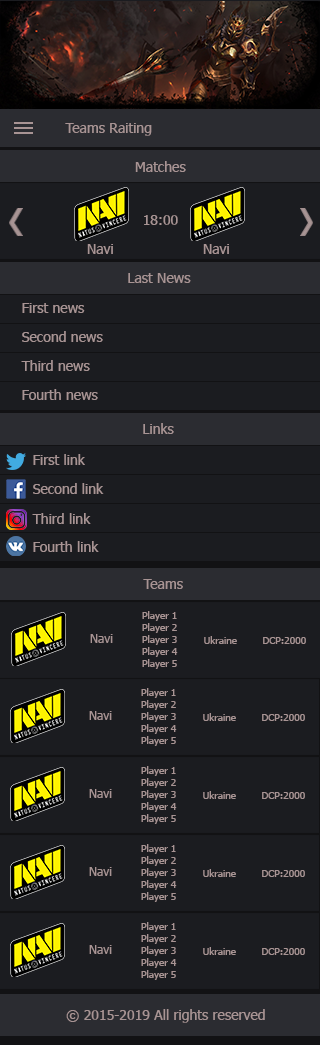
<style>
.page{position:relative;width:320px;height:1045px;background:#1b1c20}
.page>*{position:absolute;margin:0}
.t1{font:14px "Tahoma";color:#a89494}
.t2{font:10px "Tahoma";color:#a89494}
.t3{font:12px "Tahoma";color:#a89494}
</style>
<div class="page">
<p class="t1" style="left:65px;top:123px;width:87px;height:13px">Teams Raiting</p>
<p class="t1" style="left:135px;top:161px;width:51px;height:11px">Matches</p>
<p class="t1" style="left:144px;top:215px;width:34px;height:10px">18:00</p>
<p class="t1" style="left:87px;top:244px;width:26px;height:10px">Navi</p>
<p class="t1" style="left:203px;top:244px;width:26px;height:10px">Navi</p>
<p class="t1" style="left:128px;top:273px;width:63px;height:10px">Last News</p>
<p class="t1" style="left:22px;top:303px;width:63px;height:10px">First news</p>
<p class="t1" style="left:22px;top:331px;width:81px;height:11px">Second news</p>
<p class="t1" style="left:21px;top:360px;width:69px;height:11px">Third news</p>
<p class="t1" style="left:22px;top:389px;width:76px;height:11px">Fourth news</p>
<p class="t1" style="left:143px;top:423px;width:31px;height:11px">Links</p>
<p class="t1" style="left:33px;top:454px;width:52px;height:11px">First link</p>
<p class="t1" style="left:33px;top:483px;width:71px;height:11px">Second link</p>
<p class="t1" style="left:32px;top:513px;width:59px;height:11px">Third link</p>
<p class="t1" style="left:33px;top:541px;width:66px;height:11px">Fourth link</p>
<p class="t1" style="left:143px;top:579px;width:40px;height:10px">Teams</p>
<p class="t2" style="left:142px;top:611px;width:36px;height:58px">Player 1<br>Player 2<br>Player 3<br>Player 4<br>Player 5</p>
<p class="t3" style="left:90px;top:634px;width:23px;height:9px">Navi</p>
<p class="t2" style="left:204px;top:636px;width:33px;height:8px">Ukraine</p>
<p class="t2" style="left:263px;top:637px;width:43px;height:7px">DCP:2000</p>
<p class="t2" style="left:141px;top:688px;width:36px;height:58px">Player 1<br>Player 2<br>Player 3<br>Player 4<br>Player 5</p>
<p class="t3" style="left:89px;top:711px;width:23px;height:9px">Navi</p>
<p class="t2" style="left:203px;top:713px;width:33px;height:8px">Ukraine</p>
<p class="t2" style="left:262px;top:714px;width:43px;height:7px">DCP:2000</p>
<p class="t2" style="left:141px;top:766px;width:36px;height:58px">Player 1<br>Player 2<br>Player 3<br>Player 4<br>Player 5</p>
<p class="t3" style="left:89px;top:789px;width:23px;height:9px">Navi</p>
<p class="t2" style="left:203px;top:791px;width:33px;height:8px">Ukraine</p>
<p class="t2" style="left:262px;top:792px;width:43px;height:7px">DCP:2000</p>
<p class="t2" style="left:141px;top:844px;width:36px;height:58px">Player 1<br>Player 2<br>Player 3<br>Player 4<br>Player 5</p>
<p class="t3" style="left:89px;top:867px;width:23px;height:9px">Navi</p>
<p class="t2" style="left:203px;top:869px;width:33px;height:8px">Ukraine</p>
<p class="t2" style="left:262px;top:870px;width:43px;height:7px">DCP:2000</p>
<p class="t2" style="left:141px;top:922px;width:36px;height:58px">Player 1<br>Player 2<br>Player 3<br>Player 4<br>Player 5</p>
<p class="t3" style="left:89px;top:945px;width:23px;height:9px">Navi</p>
<p class="t2" style="left:203px;top:947px;width:33px;height:8px">Ukraine</p>
<p class="t2" style="left:262px;top:948px;width:43px;height:7px">DCP:2000</p>
<p class="t1" style="left:66px;top:1009px;width:199px;height:14px">© 2015-2019 All rights reserved</p>
</div>
